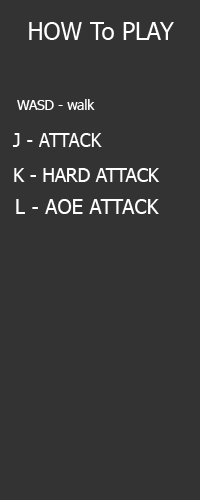
<style>
.page{position:relative;width:200px;height:500px;background:#333333}
.page>*{position:absolute;margin:0}
.t1{font:24px "Tahoma";color:#ffffff}
.t2{font:14px "Tahoma";color:#ffffff;scale:0.97 1}
.t3{font:18.7px "Tahoma";color:#ffffff}
.t4{font:20.3px "Tahoma";color:#ffffff}
</style>
<div class="page">
<p class="t1" style="left:29px;top:22px;width:145px;height:18px">HOW To PLAY</p>
<p class="t2" style="left:17px;top:99px;width:78px;height:11px">WASD - walk</p>
<p class="t3" style="left:12px;top:133px;width:90px;height:14px">J - ATTACK</p>
<p class="t3" style="left:14px;top:168px;width:146px;height:14px">K - HARD ATTACK</p>
<p class="t4" style="left:16px;top:199px;width:143px;height:15px">L - AOE ATTACK</p>
</div>
